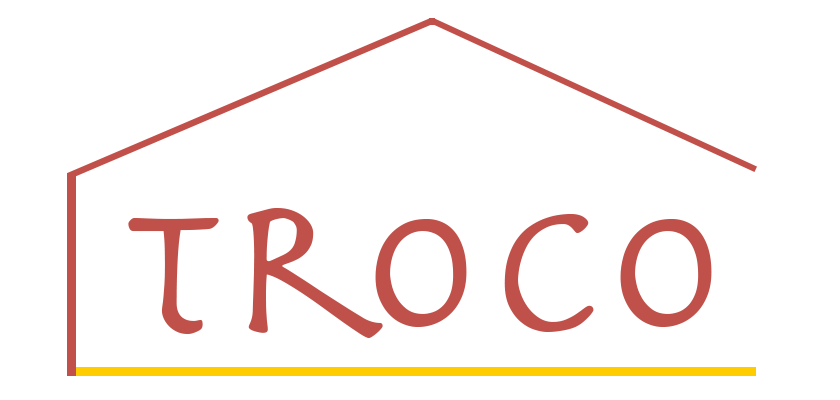
<style>
.page{position:relative;width:840px;height:400px;background:#ffffff}
.page>*{position:absolute;margin:0}
.t1{font:200px "Herculanum";color:#bf514a}
</style>
<div class="page">
<p class="t1" style="left:128px;top:208px;width:584px;height:130px">Troco</p>
</div>
